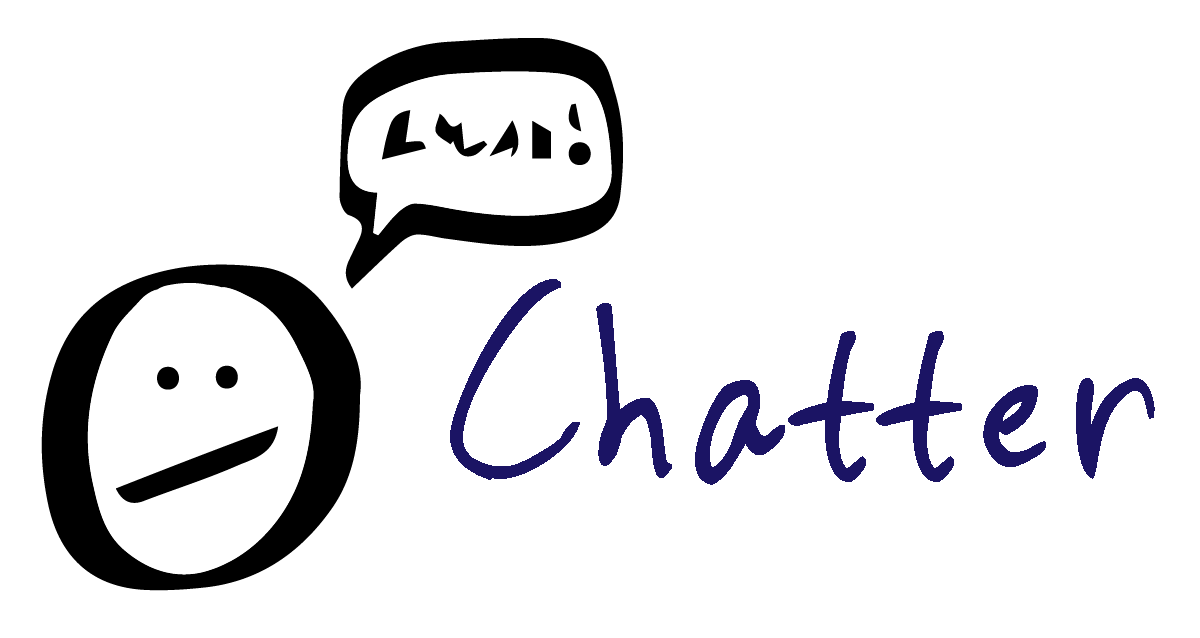
<style>
.page{position:relative;width:1200px;height:638px;background:#ffffff}
.page>*{position:absolute;margin:0}
.t1{font:270px "VincHand";color:#1b1464}
</style>
<div class="page">
<p class="t1" style="left:450px;top:279px;width:705px;height:206px">Chatter</p>
</div>
